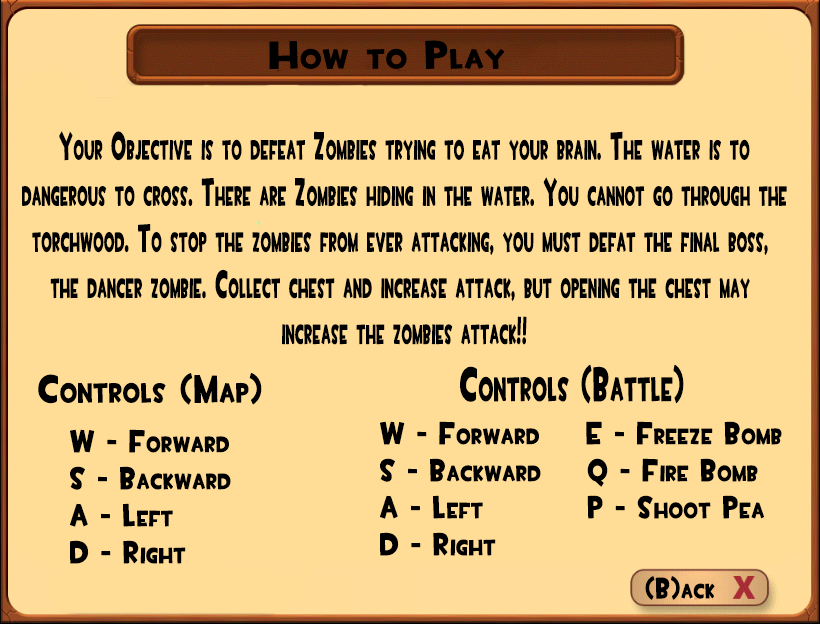
<style>
.page{position:relative;width:820px;height:624px;background:#ffdd97}
.page>*{position:absolute;margin:0}
.t1{font:38.4px "TF2Build";letter-spacing:0.025em;color:#000000;font-variant:small-caps;font-weight:bold}
.t2{font:38.4px "TF2Build";letter-spacing:0.025em;color:#000000;font-variant:small-caps;font-weight:bold;scale:0.48 1}
.t3{font:47.2px "TF2Build";letter-spacing:0.025em;color:#000000;font-variant:small-caps;font-weight:bold;scale:0.56 1}
.t4{font:38.4px "TF2Build";letter-spacing:0.025em;color:#000000;font-variant:small-caps;font-weight:bold;scale:0.8 1}
.t5{font:30.9px "TF2Build";letter-spacing:0.025em;color:#000000;font-variant:small-caps;font-weight:bold;scale:0.83 1}
.t6{font:28.7px "TF2Build";letter-spacing:0.025em;color:#000000;font-variant:small-caps;font-weight:bold;scale:0.81 1}
</style>
<div class="page">
<p class="t1" style="left:269px;top:40px;width:236px;height:29px">How to Play</p>
<p class="t2" style="left:22px;top:131px;width:765px;height:214px;text-align:center">Your Objective is to defeat Zombies trying to eat your brain. The water is to<br> dangerous to cross. There are Zombies hiding in the water. You cannot go through the <br>torchwood. To stop the zombies from ever attacking, you must defat the final boss, <br>the dancer zombie. Collect chest and increase attack, but opening the chest may <br>increase the zombies attack!!</p>
<p class="t3" style="left:460px;top:364px;width:224px;height:40px">Controls (Battle)</p>
<p class="t4" style="left:38px;top:373px;width:224px;height:32px">Controls (Map)</p>
<p class="t5" style="left:380px;top:421px;width:402px;height:135px">W - Forward    E - Freeze Bomb<br>S - Backward    Q - Fire Bomb   <br>A - Left         P - Shoot Pea<br>D - Right</p>
<p class="t5" style="left:70px;top:429px;width:161px;height:135px">W - Forward<br>S - Backward<br>A - Left<br>D - Right</p>
<p class="t6" style="left:645px;top:576px;width:70px;height:24px">(B)ack</p>
</div>
